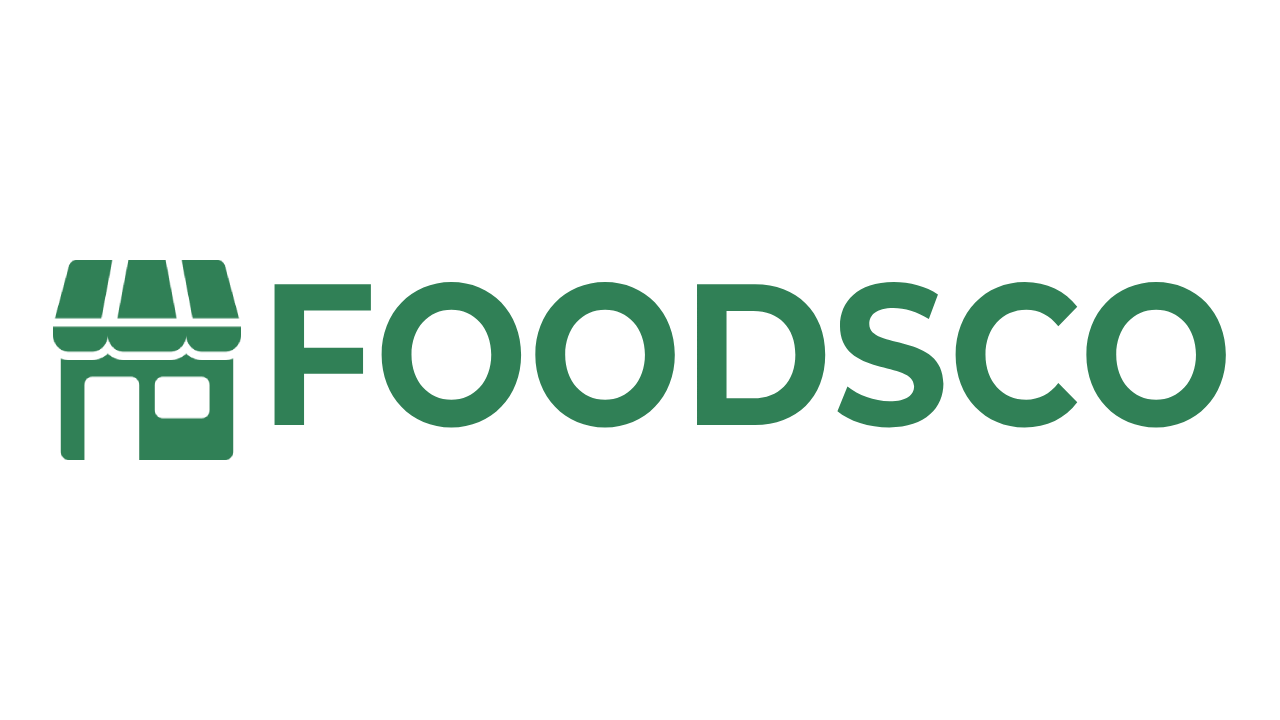
<style>
.page{position:relative;width:1280px;height:720px;background:#ffffff}
.page>*{position:absolute;margin:0}
.t1{font:200.9px "Montserrat-Bold";color:#308056;scale:0.91 1}
</style>
<div class="page">
<p class="t1" style="left:274px;top:282px;width:952px;height:146px">FOODSCO</p>
</div>
